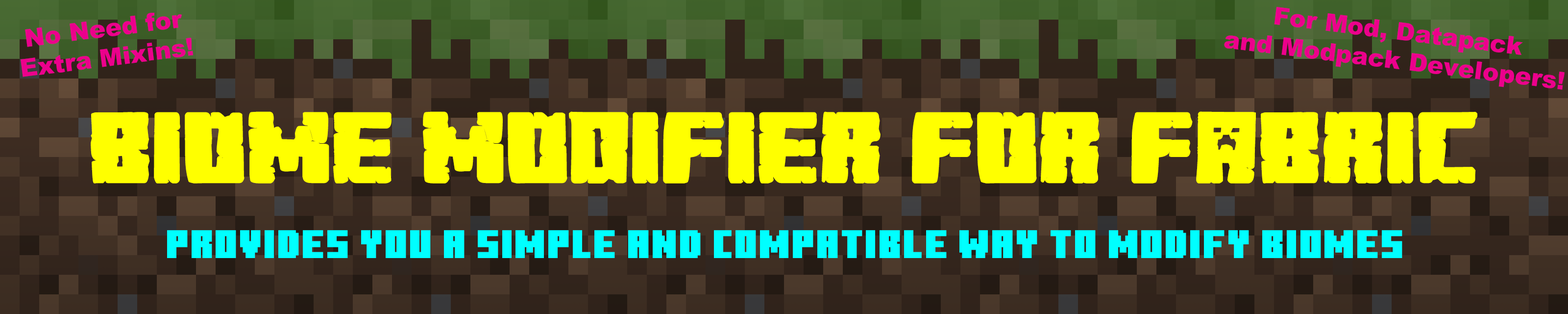
<style>
.page{position:relative;width:1568px;height:314px}
.page>*{position:absolute;margin:0}
.t1{font:24.4px/29.3px "Arial-Black";color:#ec008c}
.t2{font:97.6px "MinecraftEvenings";color:#ffff00;font-weight:bold}
.t3{font:39.1px "MinecraftTen";letter-spacing:0.01em;color:#00ffff;font-weight:bold}
</style>
<div class="page">
<p class="t1" style="left:21px;top:13px;width:173px;height:64px;text-align:center;rotate:-7deg">No Need for<br>Extra Mixins!</p>
<p class="t1" style="left:1224px;top:7px;width:341px;height:83px;text-align:center;rotate:7deg">For Mod, Datapack<br>and Modpack Developers!</p>
<p class="t2" style="left:91px;top:111px;width:1386px;height:72px">Biome Modifier for Fabric</p>
<p class="t3" style="left:167px;top:230px;width:1235px;height:28px">provides you a simple and compatible way to modify biomes</p>
</div>
